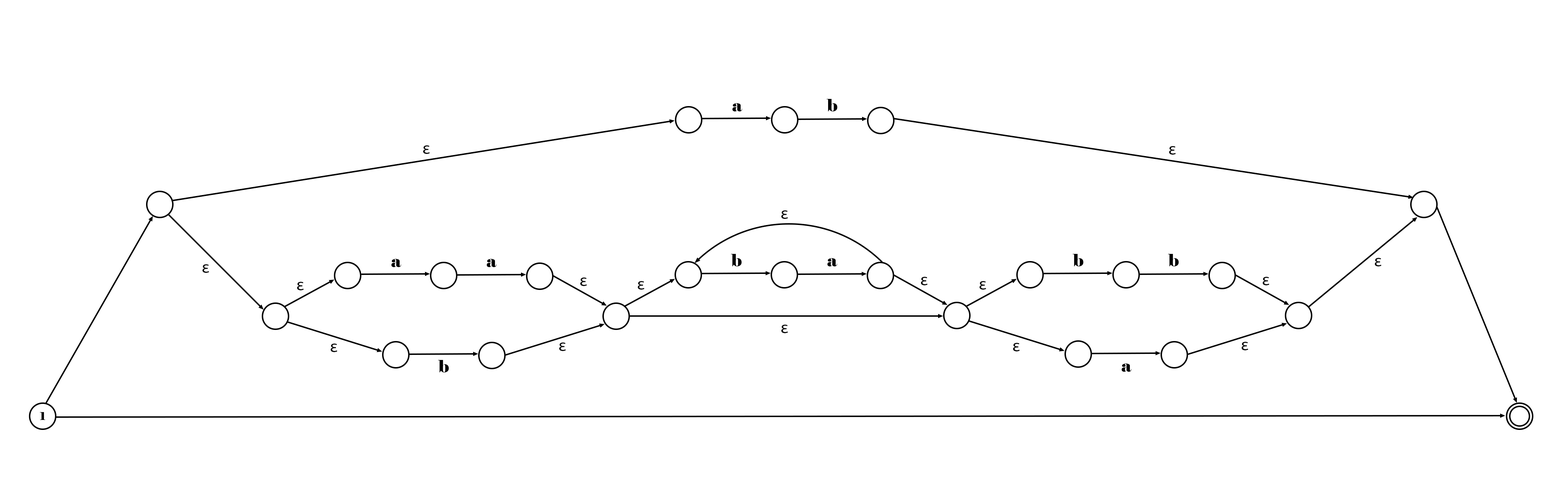
<style>
.page{position:relative;width:1568px;height:501px;background:#ffffff}
.page>*{position:absolute;margin:0}
.t1{font:17.1px "Elephant-Regular";color:#000000}
.t2{font:17.1px "MyriadPro-Regular";color:#000000}
.t3{font:10.7px "Elephant-Regular";color:#000000}
</style>
<div class="page">
<p class="t1" style="left:827px;top:99px;width:10px;height:12px">b</p>
<p class="t1" style="left:732px;top:103px;width:10px;height:8px">a</p>
<p class="t2" style="left:423px;top:145px;width:7px;height:9px">ε</p>
<p class="t2" style="left:1169px;top:146px;width:7px;height:9px">ε</p>
<p class="t2" style="left:781px;top:210px;width:7px;height:9px">ε</p>
<p class="t1" style="left:731px;top:254px;width:11px;height:12px">b</p>
<p class="t1" style="left:1073px;top:254px;width:10px;height:12px">b</p>
<p class="t1" style="left:1168px;top:254px;width:11px;height:12px">b</p>
<p class="t2" style="left:1375px;top:258px;width:7px;height:8px">ε</p>
<p class="t2" style="left:202px;top:264px;width:7px;height:9px">ε</p>
<p class="t1" style="left:391px;top:259px;width:10px;height:8px">a</p>
<p class="t1" style="left:487px;top:259px;width:10px;height:8px">a</p>
<p class="t1" style="left:827px;top:258px;width:10px;height:8px">a</p>
<p class="t2" style="left:297px;top:282px;width:7px;height:8px">ε</p>
<p class="t2" style="left:580px;top:277px;width:7px;height:9px">ε</p>
<p class="t2" style="left:638px;top:281px;width:7px;height:9px">ε</p>
<p class="t2" style="left:921px;top:277px;width:7px;height:8px">ε</p>
<p class="t2" style="left:980px;top:281px;width:6px;height:9px">ε</p>
<p class="t2" style="left:1263px;top:277px;width:6px;height:8px">ε</p>
<p class="t2" style="left:781px;top:325px;width:7px;height:8px">ε</p>
<p class="t2" style="left:1242px;top:342px;width:6px;height:8px">ε</p>
<p class="t2" style="left:331px;top:344px;width:6px;height:8px">ε</p>
<p class="t2" style="left:559px;top:342px;width:7px;height:9px">ε</p>
<p class="t2" style="left:1013px;top:343px;width:7px;height:8px">ε</p>
<p class="t1" style="left:438px;top:360px;width:11px;height:12px">b</p>
<p class="t1" style="left:1122px;top:364px;width:10px;height:8px">a</p>
<p class="t3" style="left:40px;top:412px;width:5px;height:8px">1</p>
</div>
